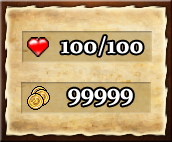
<style>
.page{position:relative;width:172px;height:142px}
.page>*{position:absolute;margin:0}
.t1{font:24px "Constantia-Bold";color:#ffffff}
</style>
<div class="page">
<p class="t1" style="left:61px;top:36px;width:82px;height:20px">100/100</p>
<p class="t1" style="left:68px;top:88px;width:65px;height:18px">99999</p>
</div>
